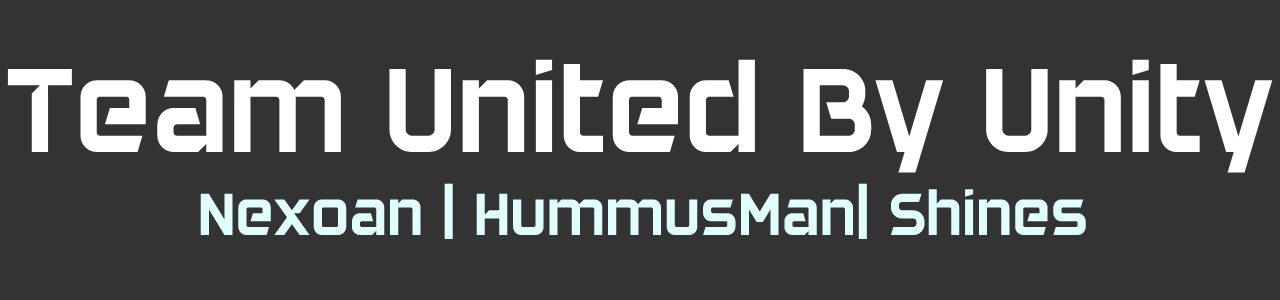
<style>
.page{position:relative;width:1280px;height:300px;background:#333333}
.page>*{position:absolute;margin:0}
.t1{font:123px "DAGGERSQUARE";color:#ffffff}
.t2{font:61px "DAGGERSQUARE";color:#e0fefe}
</style>
<div class="page">
<p class="t1" style="left:7px;top:59px;width:1266px;height:114px">Team United By Unity</p>
<p class="t2" style="left:200px;top:183px;width:886px;height:57px">Nexoan | HummusMan| Shines</p>
</div>
